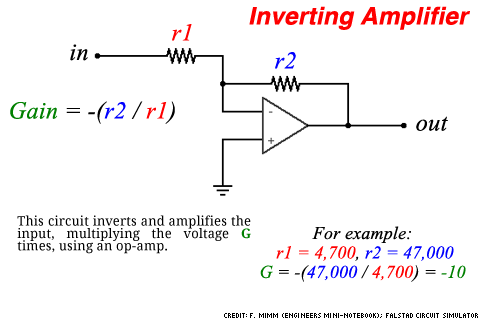
<style>
.page{position:relative;width:480px;height:320px;background:#ffffff}
.page>*{position:absolute;margin:0}
.t1{font:24.4px "Helvetica-BoldOblique";letter-spacing:0.01em;color:#fe0000}
.t2{font:24.4px "TimesNewRomanPS-ItalicMT";letter-spacing:0.01em;color:#ff0000}
.t3{font:24.4px "TimesNewRomanPS-ItalicMT";letter-spacing:0.01em;color:#000000}
.t4{font:24.4px "TimesNewRomanPS-ItalicMT";letter-spacing:0.01em;color:#0000ff}
.t5{font:24.4px "TimesNewRomanPS-ItalicMT";letter-spacing:0.01em;color:#008000}
.t6{font:13px/12.4px "DroidSerif";letter-spacing:0.01em;color:#000000}
.t7{font:13px/12.4px "DroidSerif-Bold";letter-spacing:0.01em;color:#008000}
.t8{font:18px/19.4px "TimesNewRomanPS-ItalicMT";letter-spacing:0.01em;color:#000000}
.t9{font:18px/19.4px "TimesNewRomanPS-ItalicMT";letter-spacing:0.01em;color:#ff0000}
.t10{font:18px/19.4px "TimesNewRomanPS-ItalicMT";letter-spacing:0.01em;color:#0000ff}
.t11{font:18px/19.4px "TimesNewRomanPS-ItalicMT";letter-spacing:0.01em;color:#008000}
.t12{font:8px "Picopixel";letter-spacing:0.01em;color:#000000;text-transform:uppercase}
.t13{font:8px "Picopixel";letter-spacing:0.01em;color:#000000}
</style>
<div class="page">
<p class="t1" style="left:249px;top:6px;width:221px;height:24px">Inverting Amplifier</p>
<p class="t2" style="left:172px;top:24px;width:20px;height:17px">r1</p>
<p class="t3" style="left:70px;top:44px;width:18px;height:17px">in</p>
<p class="t4" style="left:275px;top:52px;width:21px;height:17px">r2</p>
<p class="t5" style="left:10px;top:101px;width:165px;height:23px">Gain<span class="t3"> = -(</span><span class="t4">r2</span><span class="t3"> / </span><span class="t2">r1</span><span class="t3">)</span></p>
<p class="t3" style="left:416px;top:116px;width:32px;height:15px">out</p>
<p class="t6" style="left:17px;top:215px;width:234px;height:39px;text-align:justify">This circuit inverts and amplifies the input, multiplying the voltage <span class="t7">G </span>times, using an op-amp.</p>
<p class="t8" style="left:260px;top:226px;width:206px;height:56px;text-align:center">For example:<br> <span class="t9">r1 = 4,700</span>, <span class="t10">r2 = 47,000<br></span><span class="t11">G</span> = -(<span class="t10">47,000</span> / <span class="t9">4,700</span>) = <span class="t11">-10</span></p>
<p class="t12" style="left:224px;top:313px;width:254px;height:5px"><span class="t13">CREDIT: </span>F. Mimm (Engineers Mini-Notebook); falstad Circuit Simulator</p>
</div>
